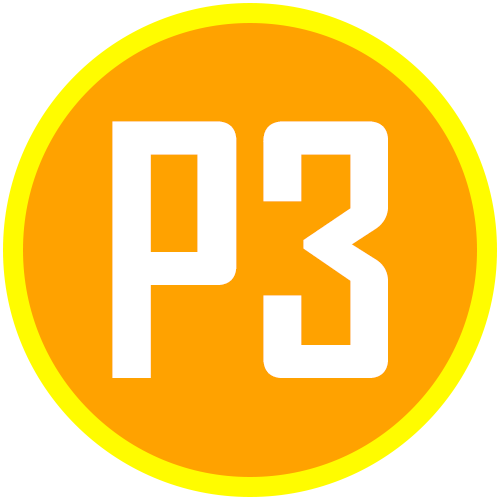
<style>
.page{position:relative;width:500px;height:500px;background:#ffa200}
.page>*{position:absolute;margin:0}
.t1{font:335.4px "AgencyFB-Bold";color:#ffffff}
</style>
<div class="page">
<p class="t1" style="left:112px;top:121px;width:276px;height:257px">P3</p>
</div>
